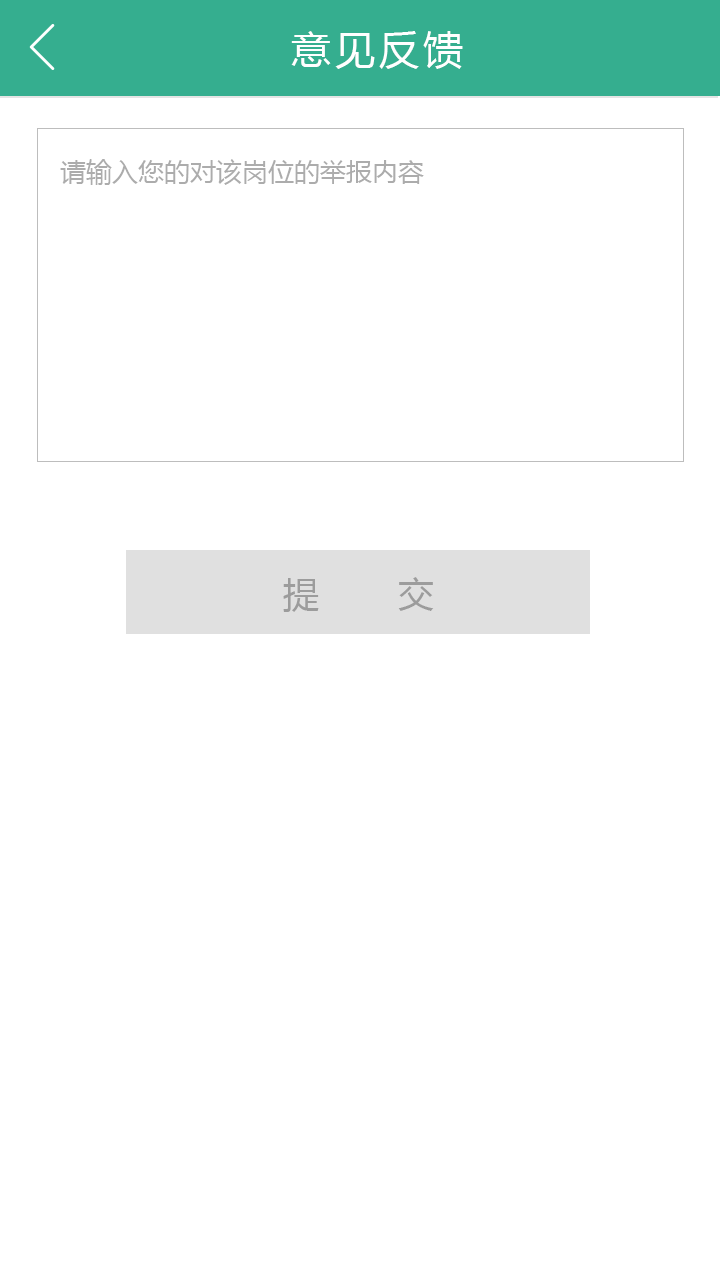
<style>
.page{position:relative;width:720px;height:1280px;background:#ffffff}
.page>*{position:absolute;margin:0}
.t1{font:40px "MicrosoftYaHei";letter-spacing:0.1em;color:#ffffff}
.t2{font:26px "MicrosoftYaHei";color:#acacac}
.t3{font:36px "MicrosoftYaHei";letter-spacing:0.2em;color:#9b9b9b}
</style>
<div class="page">
<p class="t1" style="left:291px;top:31px;width:172px;height:38px">意见反馈</p>
<p class="t2" style="left:60px;top:159px;width:364px;height:26px">请输入您的对该岗位的举报内容</p>
<p class="t3" style="left:283px;top:577px;width:151px;height:35px">提    交</p>
</div>
